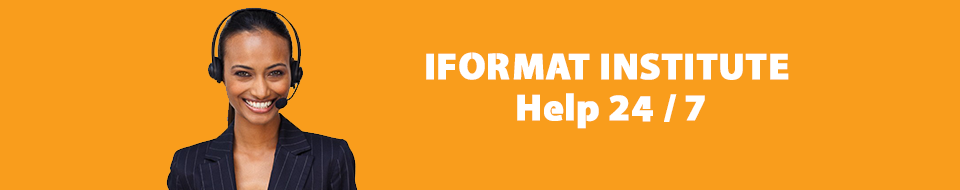
<style>
.page{position:relative;width:960px;height:190px;background:#f99d1c}
.page>*{position:absolute;margin:0}
.t1{font:37.5px/40.9px "Cleanvertising-Black";color:#ffffff;font-weight:bold}
</style>
<div class="page">
<p class="t1" style="left:426px;top:52px;width:363px;height:77px;text-align:center">IFORMAT INSTITUTE <br>Help 24 / 7</p>
</div>
